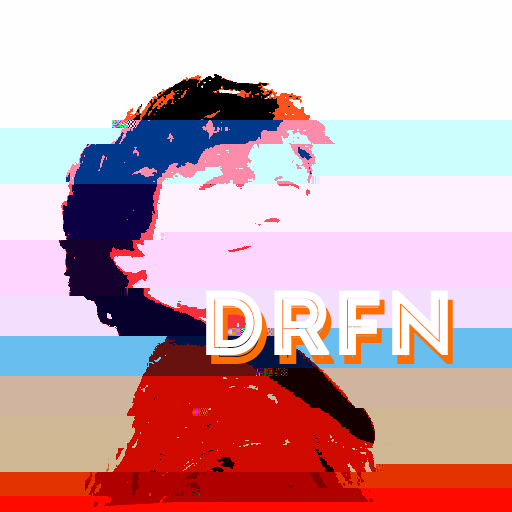
<style>
.page{position:relative;width:512px;height:512px;background:#fefefe}
.page>*{position:absolute;margin:0}
.t1{font:91.9px "Intro-Inline";color:#ffffff;text-transform:uppercase}
</style>
<div class="page">
<p class="t1" style="left:206px;top:290px;width:242px;height:65px">DRFN</p>
</div>
